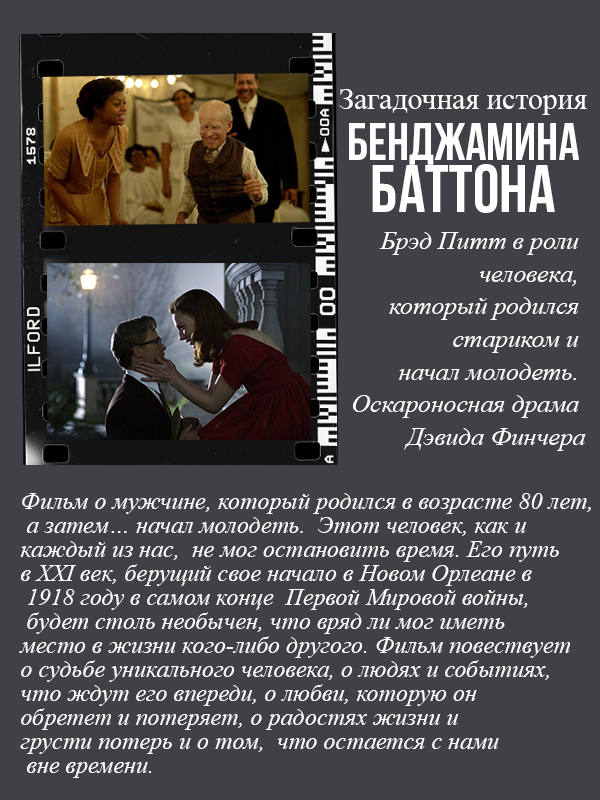
<style>
.page{position:relative;width:600px;height:800px;background:#404146}
.page>*{position:absolute;margin:0}
.t1{font:29.9px "TimesNewRomanPSMT";color:#ffffff}
.t2{font:51.6px "BebasNeueBold";color:#ffffff}
.t3{font:67.1px "BebasNeueBold";color:#ffffff}
.t4{font:25.5px/32.6px "TimesNewRomanPS-ItalicMT";color:#ffffff}
.t5{font:24px/24px "TimesNewRomanPS-ItalicMT";color:#ffffff}
</style>
<div class="page">
<p class="t1" style="left:339px;top:89px;width:248px;height:26px">Загадочная история</p>
<p class="t2" style="left:349px;top:123px;width:230px;height:42px">Бенджамина</p>
<p class="t3" style="left:372px;top:164px;width:183px;height:49px">Баттона</p>
<p class="t4" style="left:353px;top:232px;width:233px;height:219px;text-align:right">Брэд Питт в роли <br>человека, <br>который родился <br>стариком и <br>начал молодеть. <br>Оскароносная драма <br>Дэвида Финчера</p>
<p class="t5" style="left:19px;top:493px;width:572px;height:285px">Фильм о мужчине, который родился в возрасте 80 лет,<br> а затем… начал молодеть.  Этот человек, как и <br>каждый из нас,  не мог остановить время. Его путь <br>в ХХI век, берущий свое начало в Новом Орлеане в  <br> 1918 году в самом конце  Первой Мировой войны,<br> будет столь необычен, что вряд ли мог иметь <br>место в жизни кого-либо другого. Фильм повествует <br>о судьбе уникального человека, о людях и событиях, <br>что ждут его впереди, о любви, которую он <br>обретет и потеряет, о радостях жизни и <br>грусти потерь и о том,  что остается с нами<br> вне времени.</p>
</div>
